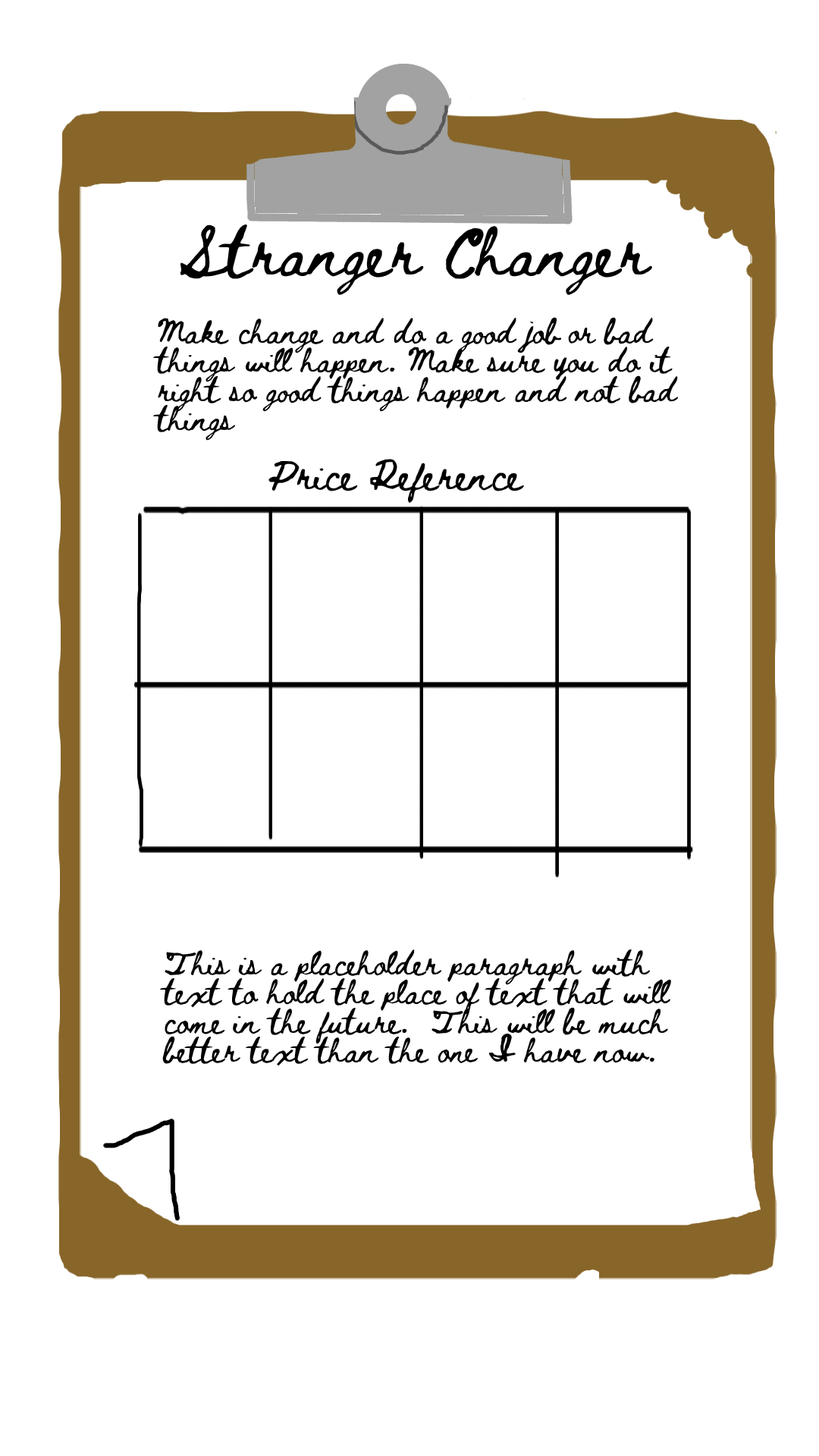
<style>
.page{position:relative;width:819px;height:1456px;background:#ffffff}
.page>*{position:absolute;margin:0}
.t1{font:48.5px "BethEllen2Regular";color:#000000}
.t2{font:24.3px "BethEllen2Regular";color:#000000}
.t3{font:30.3px "BethEllen2Regular";color:#000000}
</style>
<div class="page">
<p class="t1" style="left:180px;top:221px;width:472px;height:75px">Stranger Changer</p>
<p class="t2" style="left:153px;top:315px;width:526px;height:126px">Make change and do a good job or bad things will happen. Make sure you do it right so good things happen and not bad things</p>
<p class="t3" style="left:268px;top:459px;width:256px;height:46px">Price Reference</p>
<p class="t2" style="left:160px;top:947px;width:512px;height:119px">This is a placeholder paragraph with text to hold the place of text that will come in the future.  This will be much better text than the one I have now.</p>
</div>
